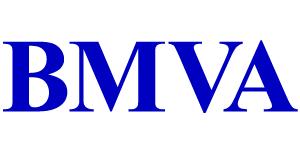
<style>
.page{position:relative;width:300px;height:150px;background:#ffffff}
.page>*{position:absolute;margin:0}
.t1{font:105px "TimesNewRomanPS-BoldMT";color:#0000c0}
.t2{font:105px "TimesNewRomanPS-BoldMT";letter-spacing:-0.05em;color:#0000c0}
</style>
<div class="page">
<p class="t1" style="left:3px;top:40px;width:295px;height:73px">BM<span class="t2">V</span>A</p>
</div>
